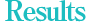
<style>
.page{position:relative;width:90px;height:22px;background:#ffffff}
.page>*{position:absolute;margin:0}
.t1{font:28px "RyuminPro-ExBold";letter-spacing:-0.08em;color:#1cbdc0}
</style>
<div class="page">
<p class="t1" style="left:5px;top:0px;width:81px;height:22px">Results</p>
</div>
